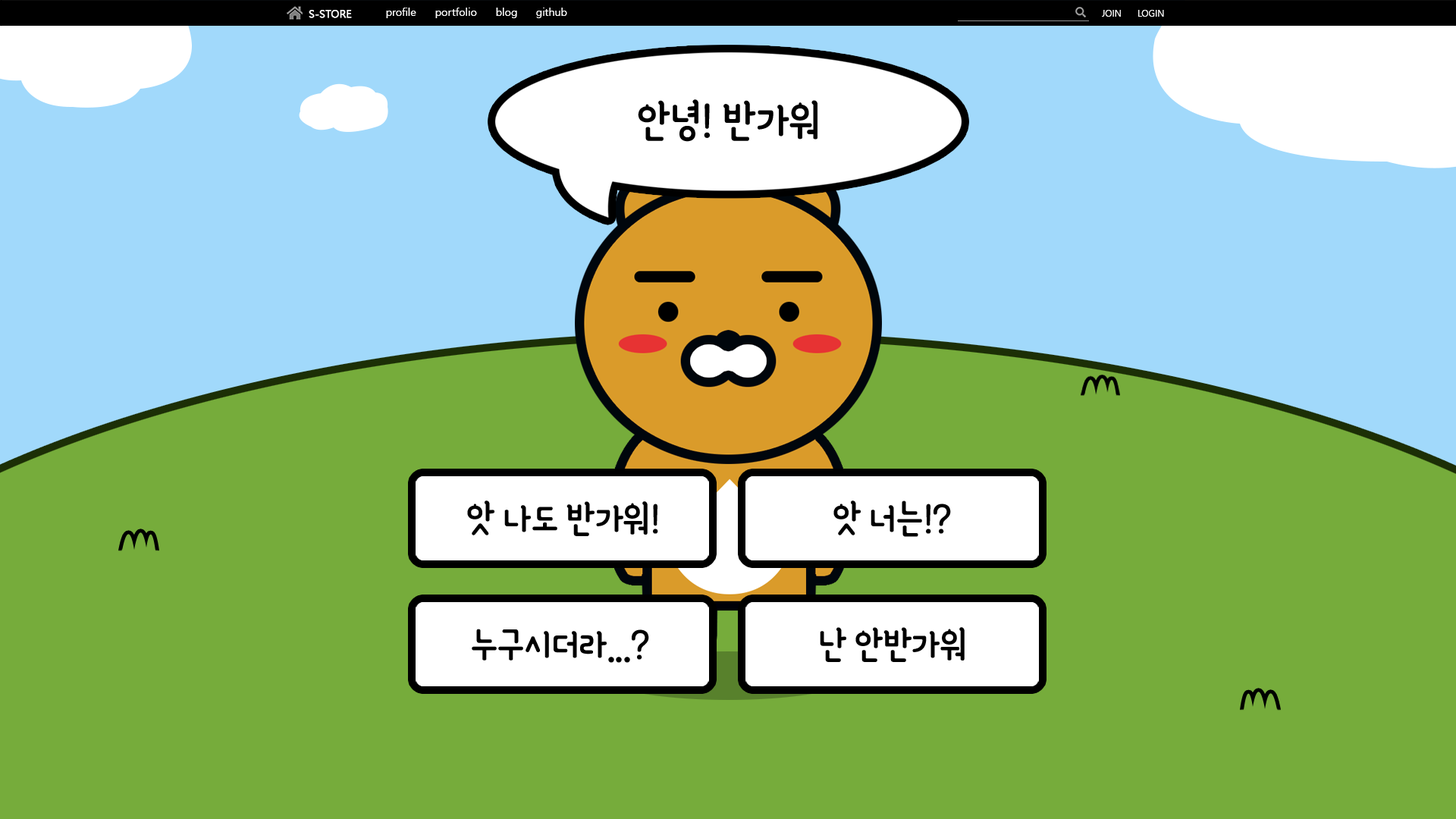
<style>
.page{position:relative;width:1456px;height:819px;background:#76ac3b}
.page>*{position:absolute;margin:0}
.t1{font:10.6px "MalgunGothic";color:#ffffff;font-weight:bold}
.t2{font:10.6px "MalgunGothic";color:#ffffff}
.t3{font:9.1px "MalgunGothic";color:#ffffff}
.t4{font:53.1px "YanoljaYacheR";letter-spacing:-0.025em;color:#000000}
.t5{font:45.5px "YanoljaYacheR";letter-spacing:-0.025em;color:#000000}
</style>
<div class="page">
<p class="t1" style="left:309px;top:10px;width:43px;height:8px">S-STORE</p>
<p class="t2" style="left:386px;top:8px;width:30px;height:10px">profile</p>
<p class="t2" style="left:435px;top:8px;width:42px;height:10px">portfolio</p>
<p class="t2" style="left:496px;top:8px;width:21px;height:10px">blog</p>
<p class="t2" style="left:536px;top:8px;width:31px;height:10px">github</p>
<p class="t3" style="left:1102px;top:10px;width:19px;height:7px">JOIN</p>
<p class="t3" style="left:1138px;top:10px;width:26px;height:7px">LOGIN</p>
<p class="t4" style="left:638px;top:99px;width:179px;height:43px">안녕! 반가워</p>
<p class="t5" style="left:467px;top:500px;width:191px;height:36px">앗 나도 반가워!</p>
<p class="t5" style="left:833px;top:500px;width:118px;height:37px">앗 너는!?</p>
<p class="t5" style="left:472px;top:629px;width:177px;height:34px">누구시더라...?</p>
<p class="t5" style="left:820px;top:627px;width:145px;height:35px">난 안반가워</p>
</div>
